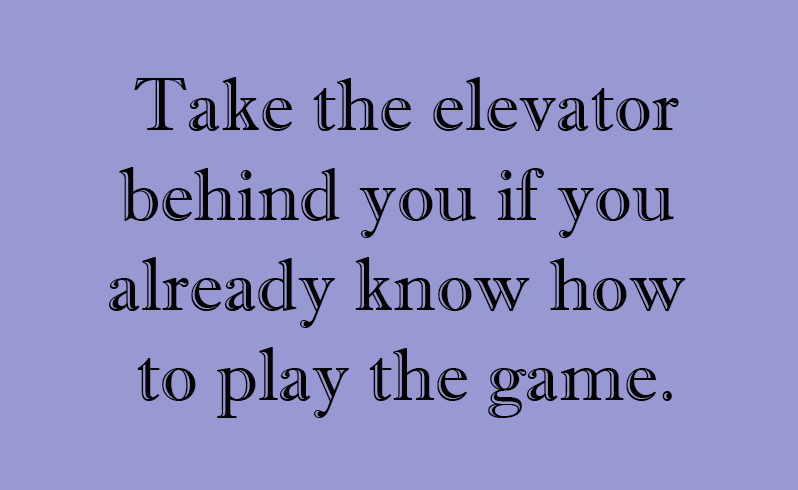
<style>
.page{position:relative;width:798px;height:490px;background:#9898d3}
.page>*{position:absolute;margin:0}
.t1{font:74.8px "ImprintMT-Shadow";color:#030303}
</style>
<div class="page">
<p class="t1" style="left:109px;top:77px;width:577px;height:341px;text-align:center">Take the elevator<br>behind you if you <br>already know how <br>to play the game.</p>
</div>
